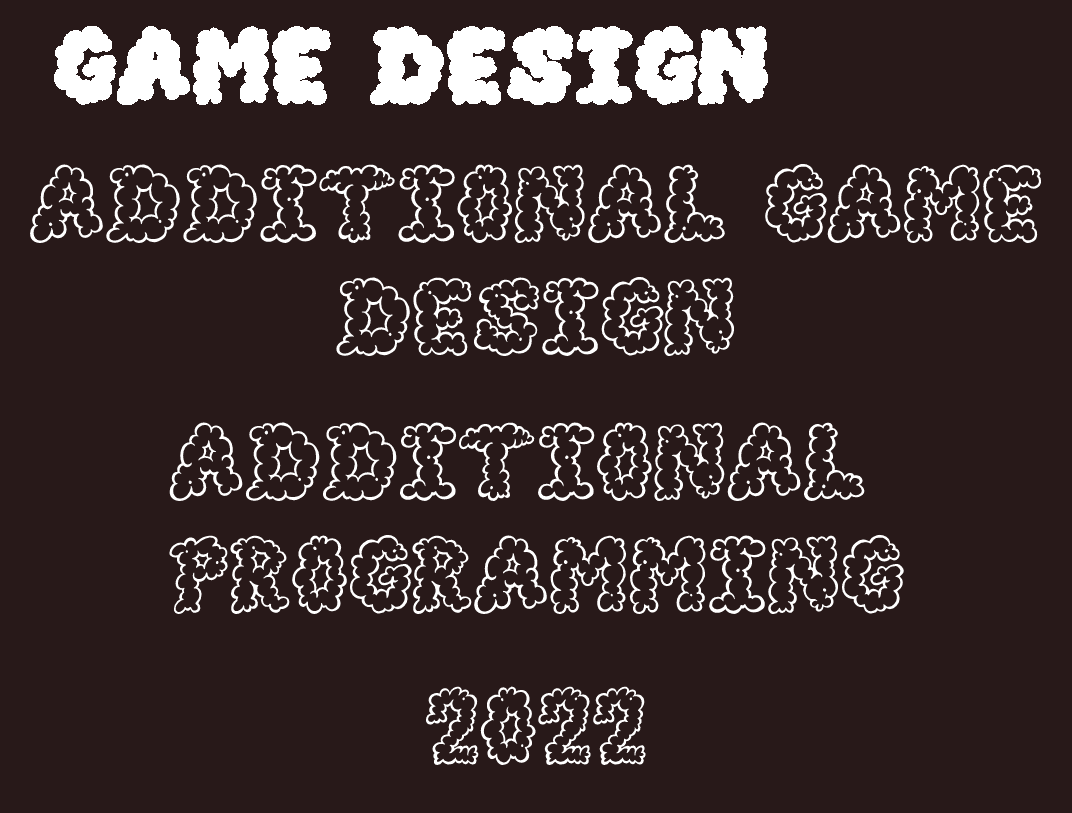
<style>
.page{position:relative;width:1072px;height:813px;background:#281919}
.page>*{position:absolute;margin:0}
.t1{font:94.1px "AlphaSmoke";color:#ffffff}
</style>
<div class="page">
<p class="t1" style="left:30px;top:163px;width:1012px;height:194px;text-align:center">ADDITIONAL GAME<br>DESIGN</p>
<p class="t1" style="left:169px;top:422px;width:735px;height:193px;text-align:center">ADDITIONAL <br>PROGRAMMING</p>
<p class="t1" style="left:425px;top:686px;width:221px;height:79px">2022</p>
</div>
